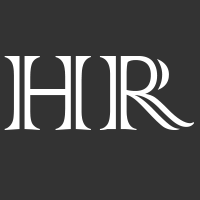
<style>
.page{position:relative;width:200px;height:200px;background:#333333}
.page>*{position:absolute;margin:0}
.t1{font:140.7px "ColonnaMT";color:#ffffff}
</style>
<div class="page">
<p class="t1" style="left:4px;top:56px;width:190px;height:74px">HR</p>
</div>
